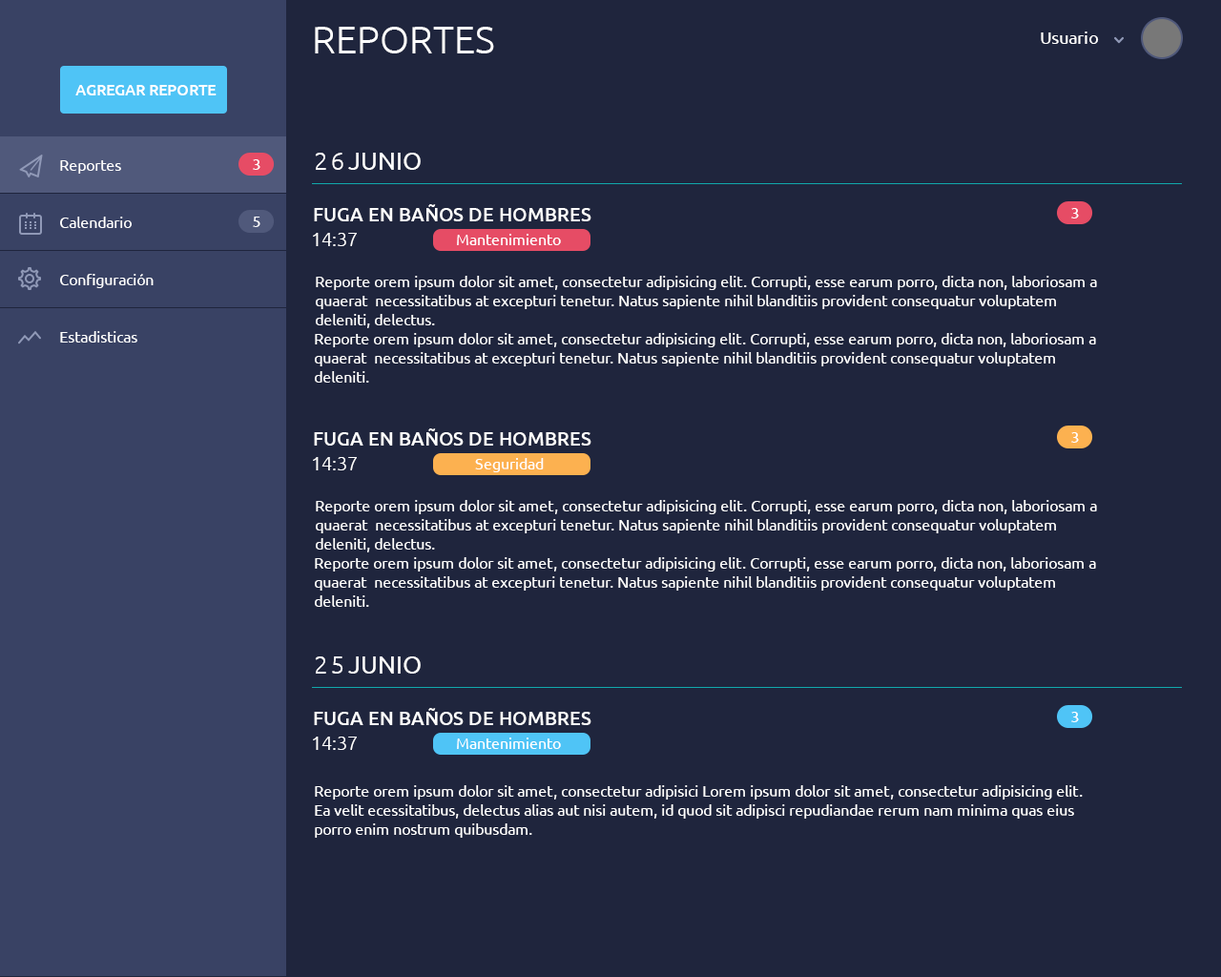
<style>
.page{position:relative;width:1221px;height:977px;background:#1f253d}
.page>*{position:absolute;margin:0}
.t1{font:38.2px "Ubuntu-Light";color:#ffffff;text-transform:uppercase}
.t2{font:17.2px "Ubuntu";color:#ffffff}
.t3{font:15.3px "Ubuntu-Medium";color:#ffffff}
.t4{font:15.3px/19.1px "Ubuntu";color:#ffffff}
.t5{font:15.3px "Ubuntu";color:#ffffff}
.t6{font:24.8px "Ubuntu-Light";color:#ffffff;text-transform:uppercase}
.t7{font:24.8px "Ubuntu";color:#ffffff;text-transform:uppercase}
.t8{font:19.1px "Ubuntu-Medium";color:#ffffff;text-transform:uppercase}
.t9{font:19.1px "Ubuntu-Light";color:#ffffff;text-transform:uppercase}
</style>
<div class="page">
<p class="t1" style="left:315px;top:27px;width:179px;height:26px">Reportes</p>
<p class="t2" style="left:1041px;top:31px;width:58px;height:13px">Usuario</p>
<p class="t3" style="left:75px;top:85px;width:142px;height:10px">AGREGAR REPORTE</p>
<p class="t4" style="left:60px;top:160px;width:94px;height:182px">Reportes<br><br><br>Calendario<br><br><br>Configuración<br><br><br>Estadisticas</p>
<p class="t5" style="left:253px;top:159px;width:7px;height:11px">3</p>
<p class="t6" style="left:315px;top:153px;width:28px;height:17px">26</p>
<p class="t7" style="left:348px;top:153px;width:73px;height:17px">Junio</p>
<p class="t8" style="left:314px;top:204px;width:277px;height:17px">Fuga en baños de hombres</p>
<p class="t5" style="left:1071px;top:208px;width:8px;height:10px">3</p>
<p class="t5" style="left:253px;top:217px;width:7px;height:10px">5</p>
<p class="t9" style="left:313px;top:233px;width:44px;height:13px">14:37</p>
<p class="t5" style="left:457px;top:234px;width:104px;height:11px">Mantenimiento</p>
<p class="t4" style="left:316px;top:276px;width:781px;height:52px">Reporte orem ipsum dolor sit amet, consectetur adipisicing elit. Corrupti, esse earum porro, dicta non, laboriosam a <br>quaerat  necessitatibus at excepturi tenetur. Natus sapiente nihil blanditiis provident consequatur voluptatem <br>deleniti, delectus.</p>
<p class="t4" style="left:315px;top:333px;width:781px;height:49px">Reporte orem ipsum dolor sit amet, consectetur adipisicing elit. Corrupti, esse earum porro, dicta non, laboriosam a <br>quaerat  necessitatibus at excepturi tenetur. Natus sapiente nihil blanditiis provident consequatur voluptatem <br>deleniti.</p>
<p class="t8" style="left:314px;top:428px;width:277px;height:17px">Fuga en baños de hombres</p>
<p class="t5" style="left:1071px;top:432px;width:8px;height:11px">3</p>
<p class="t9" style="left:313px;top:457px;width:44px;height:13px">14:37</p>
<p class="t5" style="left:475px;top:458px;width:69px;height:14px">Seguridad</p>
<p class="t4" style="left:316px;top:500px;width:781px;height:52px">Reporte orem ipsum dolor sit amet, consectetur adipisicing elit. Corrupti, esse earum porro, dicta non, laboriosam a <br>quaerat  necessitatibus at excepturi tenetur. Natus sapiente nihil blanditiis provident consequatur voluptatem <br>deleniti, delectus.</p>
<p class="t4" style="left:315px;top:557px;width:781px;height:50px">Reporte orem ipsum dolor sit amet, consectetur adipisicing elit. Corrupti, esse earum porro, dicta non, laboriosam a <br>quaerat  necessitatibus at excepturi tenetur. Natus sapiente nihil blanditiis provident consequatur voluptatem <br>deleniti.</p>
<p class="t6" style="left:315px;top:656px;width:28px;height:17px">25</p>
<p class="t7" style="left:348px;top:656px;width:73px;height:17px">Junio</p>
<p class="t8" style="left:314px;top:708px;width:277px;height:17px">Fuga en baños de hombres</p>
<p class="t5" style="left:1071px;top:712px;width:8px;height:10px">3</p>
<p class="t9" style="left:313px;top:736px;width:44px;height:14px">14:37</p>
<p class="t5" style="left:457px;top:737px;width:104px;height:12px">Mantenimiento</p>
<p class="t4" style="left:315px;top:785px;width:768px;height:52px">Reporte orem ipsum dolor sit amet, consectetur adipisici Lorem ipsum dolor sit amet, consectetur adipisicing elit.<br>Ea velit ecessitatibus, delectus alias aut nisi autem, id quod sit adipisci repudiandae rerum nam minima quas eius <br>porro enim nostrum quibusdam.</p>
</div>
